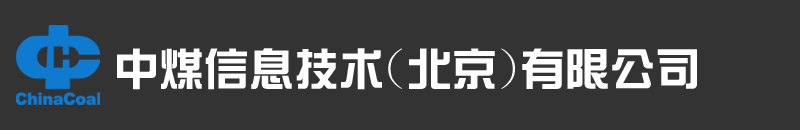
<style>
.page{position:relative;width:800px;height:130px;background:#333333}
.page>*{position:absolute;margin:0}
.t1{font:45px "DFZongYi-Bd-80-Win-GB";color:#ffffff}
</style>
<div class="page">
<p class="t1" style="left:117px;top:48px;width:580px;height:42px">中煤信息技术(北京)有限公司</p>
</div>
